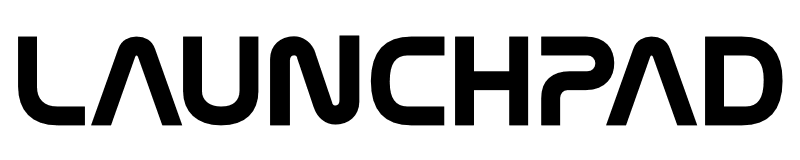
<style>
.page{position:relative;width:800px;height:160px;background:#ffffff}
.page>*{position:absolute;margin:0}
.t1{font:135px "Nasalization";color:#000000;text-transform:uppercase}
</style>
<div class="page">
<p class="t1" style="left:18px;top:35px;width:765px;height:91px">LAUNCHPAD</p>
</div>
